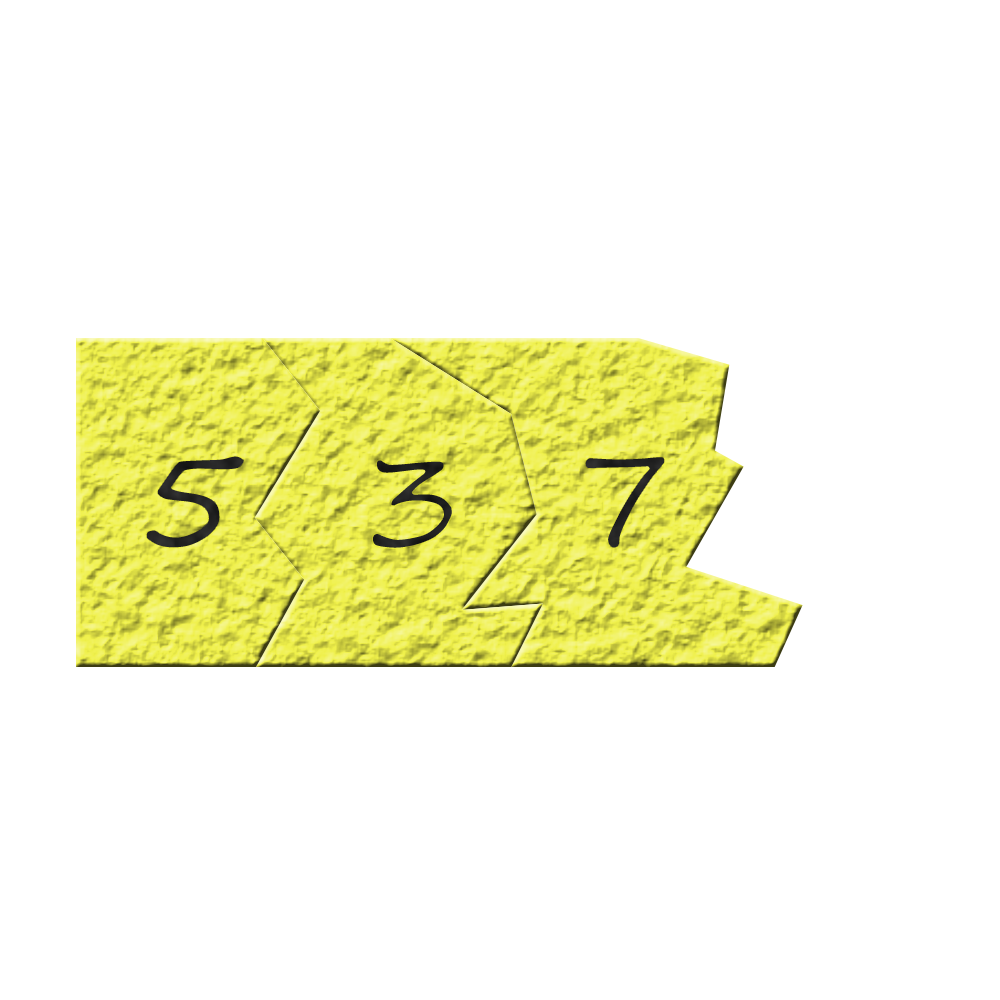
<style>
.page{position:relative;width:1000px;height:1000px;background:#ffffff}
.page>*{position:absolute;margin:0}
.t1{font:140px "SegoeScript";color:#272726}
.t2{font:140px "SegoeScript"}
.t3{font:140px "SegoeScript";color:#242424}
</style>
<div class="page">
<p class="t1" style="left:145px;top:455px;width:100px;height:94px">5</p>
<p class="t2" style="left:371px;top:458px;width:83px;height:92px">3</p>
<p class="t3" style="left:584px;top:456px;width:82px;height:93px">7</p>
</div>
